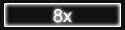
<style>
.page{position:relative;width:125px;height:30px;background:#111111}
.page>*{position:absolute;margin:0}
.t1{font:18px "ArialMT";color:#ffffff}
</style>
<div class="page">
<p class="t1" style="left:53px;top:9px;width:19px;height:14px">8x</p>
</div>
